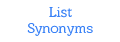
<style>
.page{position:relative;width:120px;height:42px;background:#ffffff}
.page>*{position:absolute;margin:0}
.t1{font:14.4px "Barkentina";color:#3a82f6}
.t2{font:14px "Barkentina";color:#3a82f6}
</style>
<div class="page">
<p class="t1" style="left:49px;top:7px;width:23px;height:11px">List</p>
<p class="t2" style="left:27px;top:23px;width:66px;height:13px">Synonyms</p>
</div>
